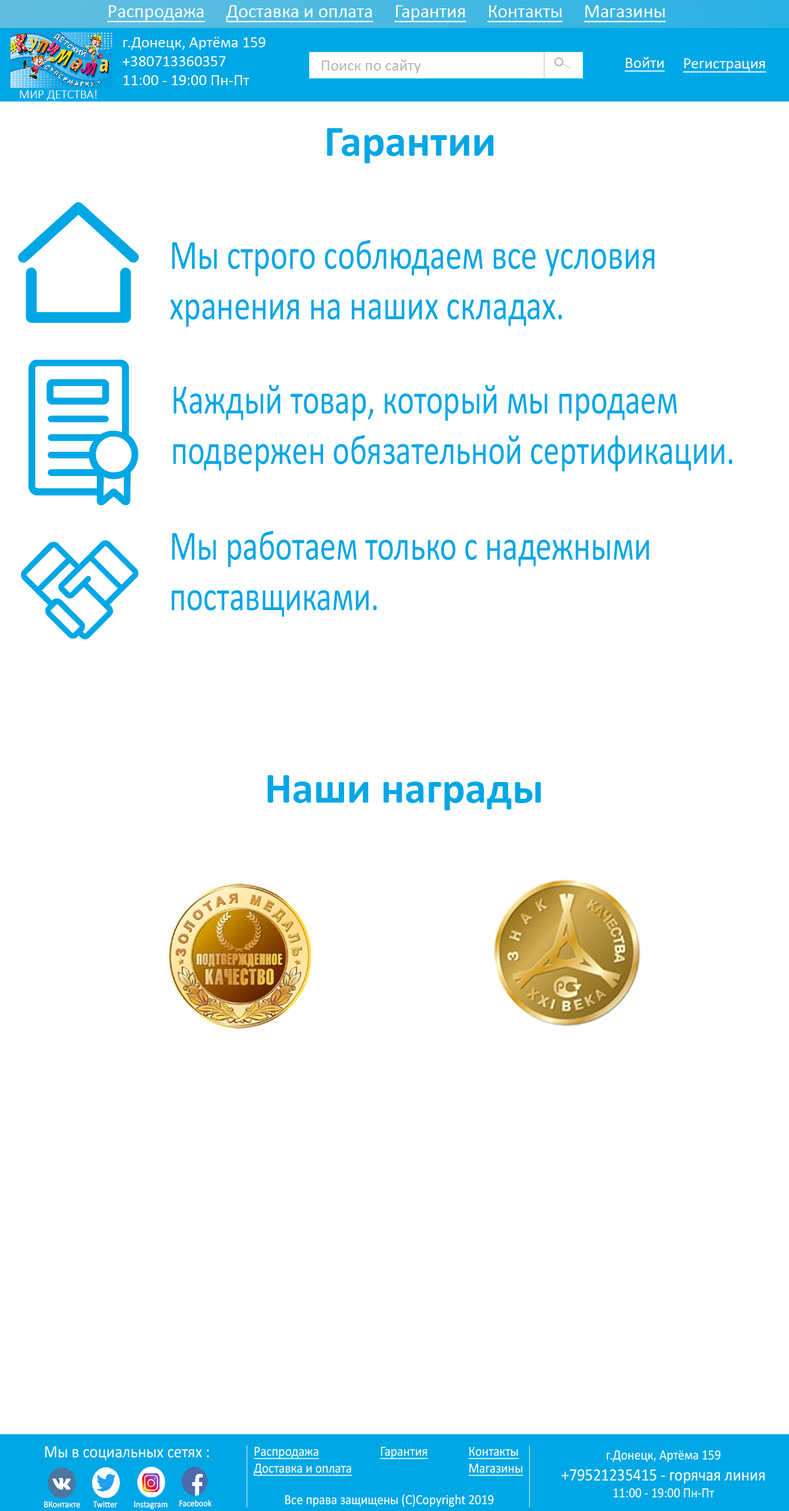
<style>
.page{position:relative;width:789px;height:1511px;background:#ffffff}
.page>*{position:absolute;margin:0}
.t1{font:18.9px "Calibri";color:#ffffff;text-decoration:underline}
.t2{font:15.8px "Calibri";color:#ffffff}
.t3{font:15.8px "Calibri";color:#b3b3b3}
.t4{font:15.8px "Calibri";color:#ffffff;text-decoration:underline}
.t5{font:12.6px "Calibri-Light";color:#ffffff}
.t6{font:43.7px "Calibri-Bold";color:#00a7e5}
.t7{font:42.1px "Calibri";color:#00a7e5;scale:0.78 1}
.t8{font:42.1px "Calibri";color:#00a7e5;scale:0.77 1}
.t9{font:17.5px "Calibri";color:#ffffff;scale:0.9 1}
.t10{font:14px "Calibri";color:#ffffff;text-decoration:underline;scale:0.9 1}
.t11{font:14px "Calibri";color:#ffffff;scale:0.9 1}
.t12{font:9.3px "Calibri";color:#ffffff;scale:0.9 1}
</style>
<div class="page">
<p class="t1" style="left:107px;top:5px;width:559px;height:18px">Распродажа     Доставка и оплата     Гарантия     Контакты     Магазины</p>
<p class="t2" style="left:123px;top:37px;width:143px;height:48px">г.Донецк, Артёма 159<br>+380713360357<br>11:00 - 19:00 Пн-Пт</p>
<p class="t3" style="left:322px;top:59px;width:99px;height:14px">Поиск по сайту</p>
<p class="t4" style="left:624px;top:57px;width:41px;height:15px">Войти</p>
<p class="t4" style="left:683px;top:58px;width:83px;height:15px">Регистрация</p>
<p class="t5" style="left:20px;top:90px;width:77px;height:10px">МИР ДЕТСТВА!</p>
<p class="t6" style="left:327px;top:128px;width:166px;height:36px">Гарантии</p>
<p class="t7" style="left:170px;top:240px;width:484px;height:87px">Мы строго соблюдаем все условия <br>хранения на наших складах.</p>
<p class="t8" style="left:173px;top:385px;width:559px;height:87px">Каждый товар, который мы продаем<br>подвержен обязательной сертификации.</p>
<p class="t8" style="left:171px;top:531px;width:478px;height:86px">Мы работаем только с надежными<br>поставщиками.</p>
<p class="t6" style="left:267px;top:775px;width:274px;height:36px">Наши награды</p>
<p class="t9" style="left:45px;top:1447px;width:164px;height:14px">Мы в социальных сетях :</p>
<p class="t10" style="left:254px;top:1447px;width:98px;height:30px">Распродажа<br>Доставка и оплата</p>
<p class="t10" style="left:380px;top:1447px;width:48px;height:13px">Гарантия</p>
<p class="t10" style="left:468px;top:1447px;width:55px;height:30px">Контакты<br>Магазины</p>
<p class="t9" style="left:562px;top:1450px;width:203px;height:48px;text-align:center"><span class="t11">г.Донецк, Артёма 159<br></span>+79521235415 - горячая линия<br><span class="t11">11:00 - 19:00 Пн-Пт</span></p>
<p class="t12" style="left:44px;top:1501px;width:36px;height:7px">ВКонтакте</p>
<p class="t12" style="left:93px;top:1501px;width:24px;height:7px">Twitter</p>
<p class="t12" style="left:134px;top:1501px;width:34px;height:9px">Instagram</p>
<p class="t12" style="left:179px;top:1500px;width:33px;height:7px">Facebook</p>
<p class="t11" style="left:285px;top:1494px;width:209px;height:13px">Все права защищены (С)Copyright 2019</p>
</div>
